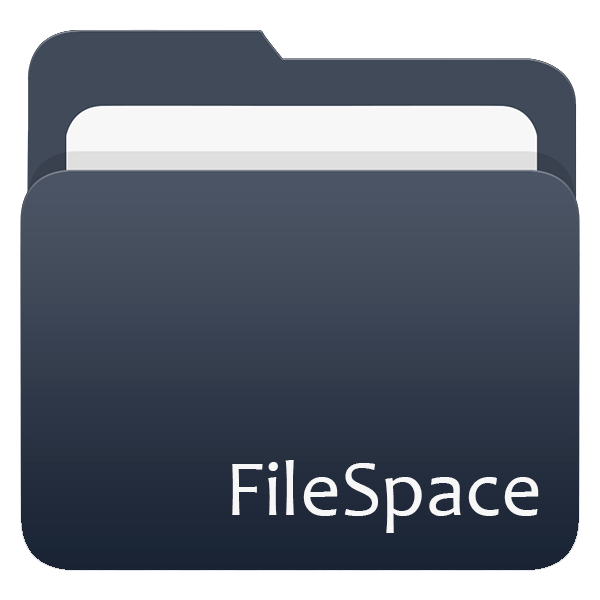
<style>
.page{position:relative;width:600px;height:600px}
.page>*{position:absolute;margin:0}
.t1{font:80px "Candara";color:#f7f7f8}
</style>
<div class="page">
<p class="t1" style="left:232px;top:460px;width:307px;height:73px">FileSpace</p>
</div>
